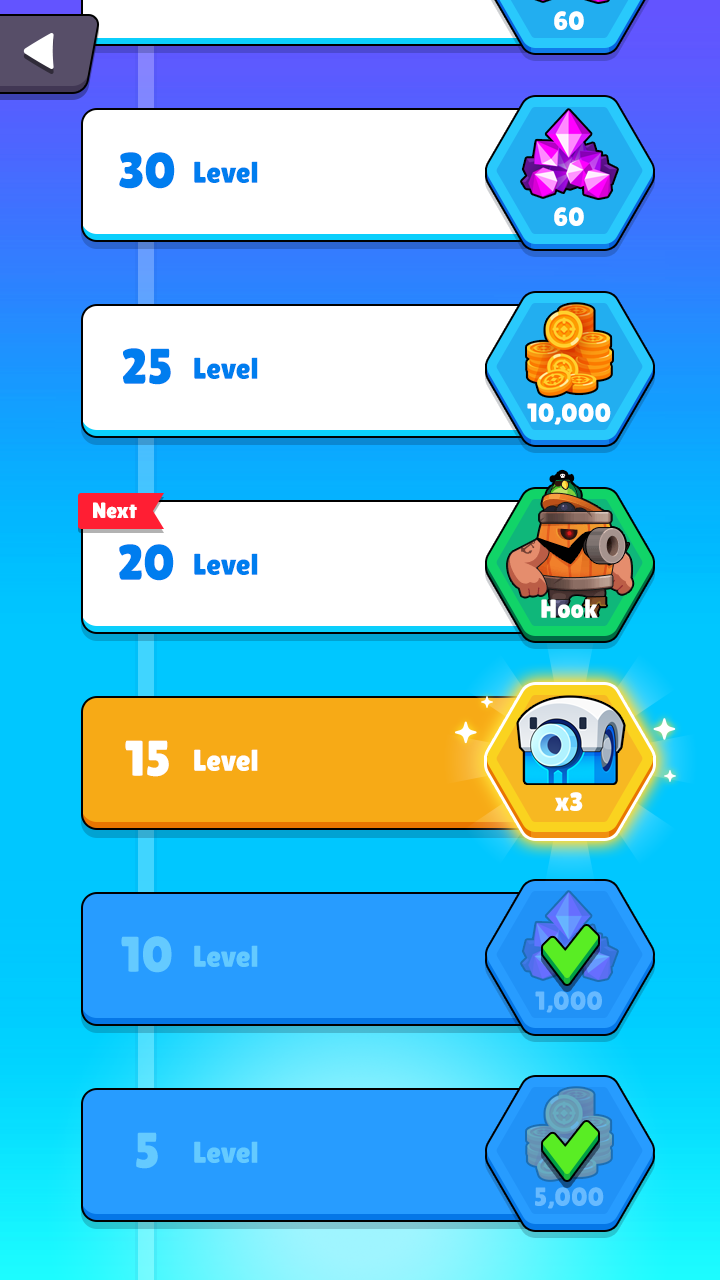
<style>
.page{position:relative;width:720px;height:1280px}
.page>*{position:absolute;margin:0}
.t1{font:26px "LilitaOne";color:#ffffff}
.t2{font:50px "LilitaOne";color:#007def}
.t3{font:30px "LilitaOne";color:#007def}
.t4{font:22px "LilitaOne";color:#ffffff}
.t5{font:50px "LilitaOne";color:#ffffff}
.t6{font:30px "LilitaOne";color:#ffffff}
.t7{font:50px "LilitaOne";color:#64caff}
.t8{font:30px "LilitaOne";color:#64caff}
.t9{font:26px "LilitaOne";color:#67baff}
</style>
<div class="page">
<p class="t1" style="left:554px;top:11px;width:30px;height:19px">60</p>
<p class="t2" style="left:119px;top:152px;width:56px;height:37px">30</p>
<p class="t3" style="left:194px;top:161px;width:64px;height:22px">Level</p>
<p class="t1" style="left:554px;top:207px;width:30px;height:19px">60</p>
<p class="t2" style="left:123px;top:348px;width:48px;height:37px">25</p>
<p class="t3" style="left:194px;top:357px;width:64px;height:22px">Level</p>
<p class="t1" style="left:527px;top:403px;width:84px;height:22px">10,000</p>
<p class="t4" style="left:93px;top:502px;width:44px;height:17px">Next</p>
<p class="t2" style="left:119px;top:544px;width:55px;height:37px">20</p>
<p class="t3" style="left:194px;top:553px;width:64px;height:22px">Level</p>
<p class="t1" style="left:541px;top:599px;width:57px;height:19px">Hook</p>
<p class="t5" style="left:125px;top:740px;width:44px;height:37px">15</p>
<p class="t6" style="left:194px;top:749px;width:64px;height:22px">Level</p>
<p class="t1" style="left:555px;top:792px;width:28px;height:19px">x3</p>
<p class="t7" style="left:121px;top:936px;width:51px;height:37px">10</p>
<p class="t8" style="left:194px;top:945px;width:64px;height:22px">Level</p>
<p class="t9" style="left:535px;top:991px;width:67px;height:22px">1,000</p>
<p class="t7" style="left:136px;top:1132px;width:22px;height:37px">5</p>
<p class="t8" style="left:194px;top:1141px;width:64px;height:22px">Level</p>
<p class="t9" style="left:535px;top:1187px;width:69px;height:22px">5,000</p>
</div>
